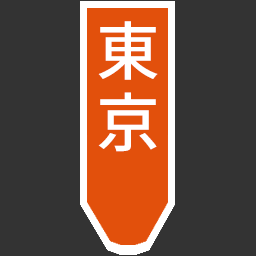
<style>
.page{position:relative;width:256px;height:256px;background:#333333}
.page>*{position:absolute;margin:0}
.t1{font:64px/71.1px "NotoSansJP-Medium";letter-spacing:0.9em;color:#ffffff;text-transform:uppercase}
</style>
<div class="page">
<p class="t1" style="left:98px;top:21px;width:60px;height:131px;text-align:center">東京</p>
</div>
